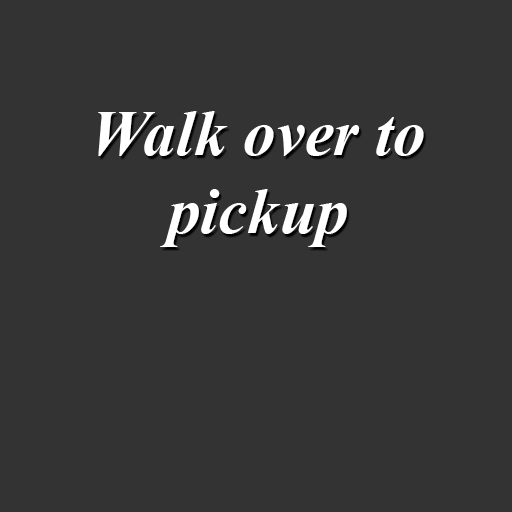
<style>
.page{position:relative;width:512px;height:512px;background:#333333}
.page>*{position:absolute;margin:0}
.t1{font:65.2px "TimesNewRomanPS-BoldItalicMT";color:#ffffff}
</style>
<div class="page">
<p class="t1" style="left:98px;top:111px;width:326px;height:136px;text-align:center">Walk over to pickup</p>
</div>
